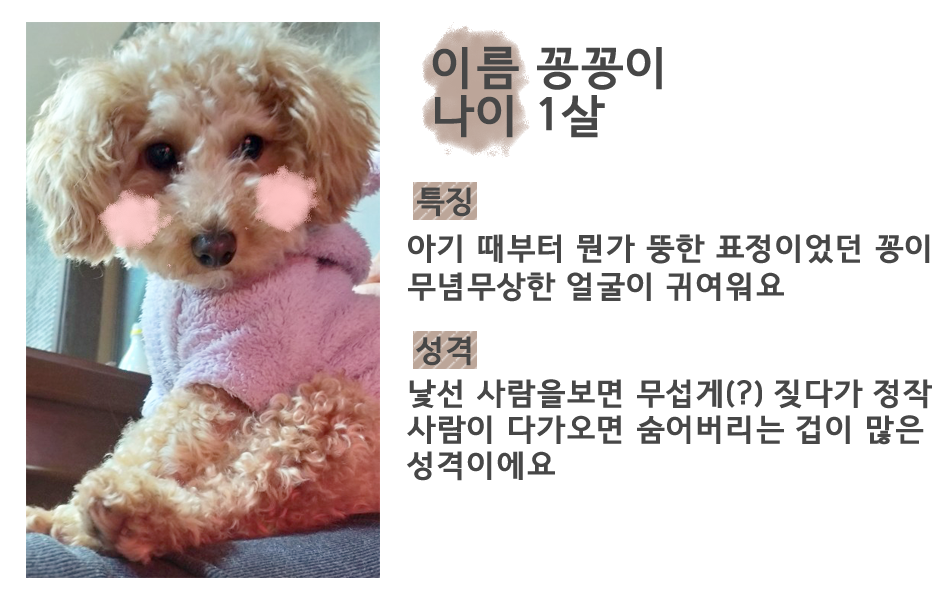
<style>
.page{position:relative;width:950px;height:600px;background:#ffffff}
.page>*{position:absolute;margin:0}
.t1{font:45px/24px "HCRDotum-Bold";color:#474747;font-weight:bold}
.t2{font:30px "HCRDotum-Bold";color:#474747;font-weight:bold}
.t3{font:30px/36px "HCRDotum-Bold";color:#474747;font-weight:bold}
</style>
<div class="page">
<p class="t1" style="left:432px;top:46px;width:230px;height:92px">이름 꽁꽁이<br><br>나이 1살</p>
<p class="t2" style="left:417px;top:187px;width:54px;height:30px">특징</p>
<p class="t2" style="left:408px;top:234px;width:522px;height:30px">아기 때부터 뭔가 뚱한 표정이었던 꽁이</p>
<p class="t2" style="left:408px;top:272px;width:376px;height:30px">무념무상한 얼굴이 귀여워요</p>
<p class="t2" style="left:416px;top:336px;width:55px;height:30px">성격</p>
<p class="t3" style="left:407px;top:379px;width:525px;height:102px">낯선 사람을보면 무섭게(?) 짖다가 정작<br>사람이 다가오면 숨어버리는 겁이 많은<br>성격이에요</p>
</div>
